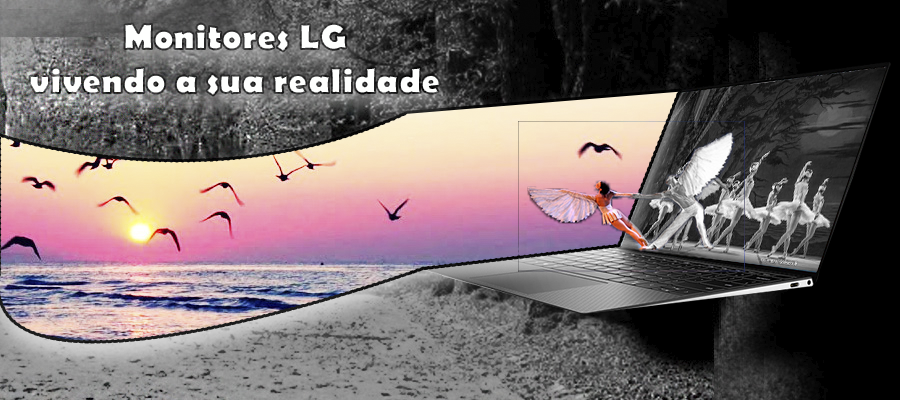
<style>
.page{position:relative;width:900px;height:400px}
.page>*{position:absolute;margin:0}
.t1{font:36px "BerlinSansFB-Bold";color:#fefffe}
</style>
<div class="page">
<p class="t1" style="left:29px;top:23px;width:411px;height:73px;text-align:center">Monitores LG<br>vivendo a sua realidade</p>
</div>
